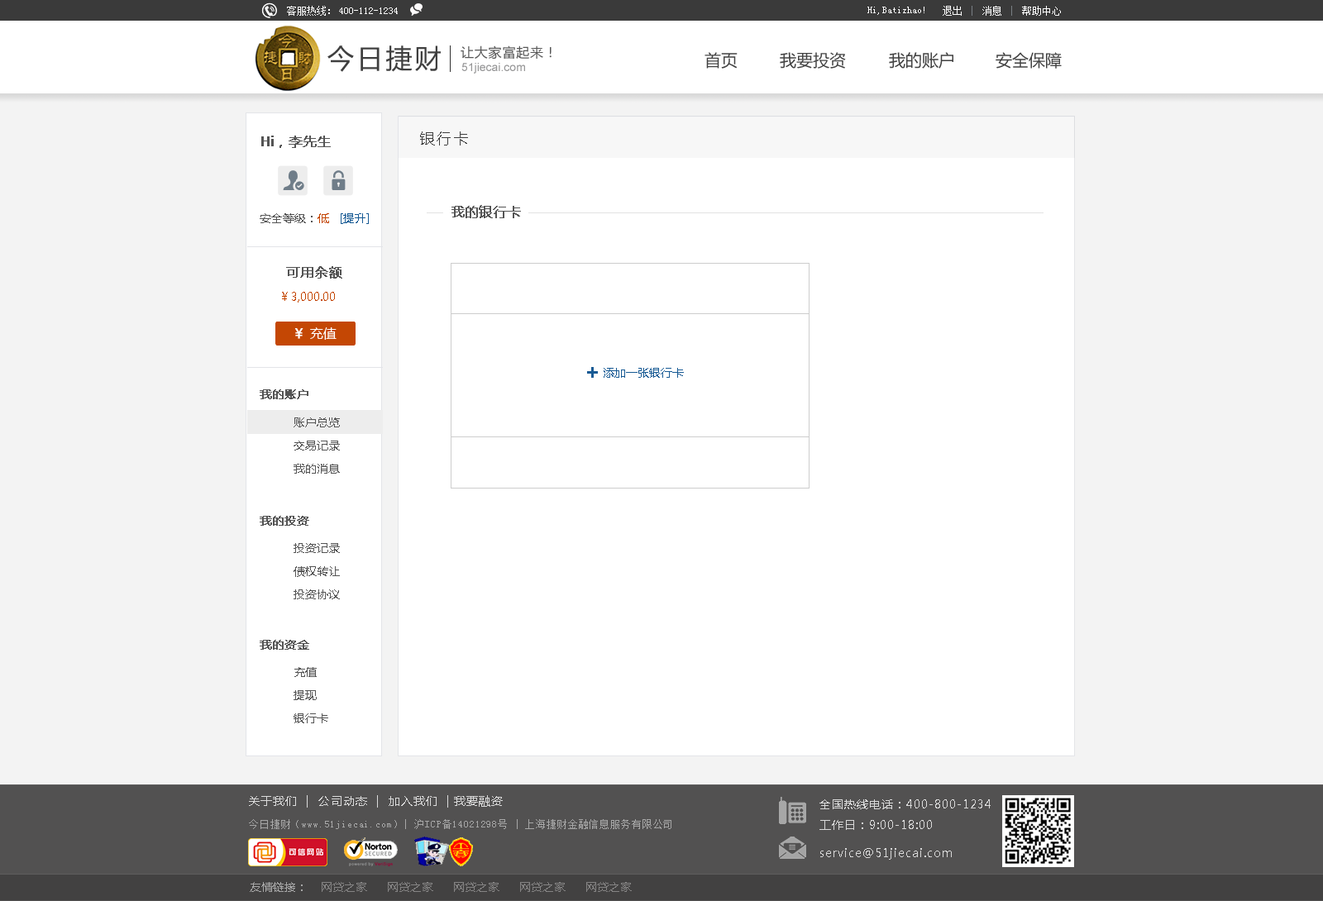
<style>
.page{position:relative;width:1323px;height:901px;background:#ffffff}
.page>*{position:absolute;margin:0}
.t1{font:9.9px "SimSun";color:#ffffff}
.t2{font:26.5px "MicrosoftYaHei";letter-spacing:0.1em;color:#3f3f3f}
.t3{font:13.2px "MicrosoftYaHei";letter-spacing:0.05em;color:#575757}
.t4{font:16.5px "MicrosoftYaHei";color:#414141}
.t5{font:11.6px "ArialMT";color:#969697}
.t6{font:13.2px "MicrosoftYaHei";color:#545454;font-weight:bold}
.t7{font:14.9px "MicrosoftYaHei";letter-spacing:0.1em;color:#3f3f3f}
.t8{font:11.6px "MicrosoftYaHei";color:#545454}
.t9{font:11.6px "MicrosoftYaHei";color:#c44704}
.t10{font:11.6px "MicrosoftYaHei";color:#175a94}
.t11{font:11.6px "MicrosoftYaHei";color:#c44703}
.t12{font:13.2px "MicrosoftYaHei";color:#ffffff}
.t13{font:13.2px "MicrosoftYaHei";color:#ffffff;font-weight:bold}
.t14{font:19.8px "MicrosoftYaHei";color:#175a94;font-weight:bold}
.t15{font:11.6px "MicrosoftYaHei";color:#545454;font-weight:bold}
.t16{font:11.6px/23.2px "MicrosoftYaHei";color:#545454}
.t17{font:11.6px "MicrosoftYaHei";letter-spacing:0.07em;color:#dbdbdb}
.t18{font:11.6px "MicrosoftYaHei";letter-spacing:0.07em;color:#dadada}
.t19{font:9.9px "SimSun";letter-spacing:0.07em;color:#a7a7a7}
.t20{font:11.6px "MicrosoftYaHei";color:#858484}
.t21{font:11.6px "MicrosoftYaHei";color:#a7a7a7}
</style>
<div class="page">
<p class="t1" style="left:287px;top:6px;width:43px;height:10px">客服热线：</p>
<p class="t1" style="left:943px;top:6px;width:118px;height:10px">退出    消息    帮助中心</p>
<p class="t1" style="left:339px;top:7px;width:59px;height:7px">400-112-1234</p>
<p class="t1" style="left:867px;top:7px;width:57px;height:8px">Hi,Batizhao!</p>
<p class="t2" style="left:327px;top:45px;width:114px;height:27px">今日捷财</p>
<p class="t3" style="left:461px;top:45px;width:91px;height:14px">让大家富起来！</p>
<p class="t4" style="left:705px;top:52px;width:33px;height:17px">首页</p>
<p class="t4" style="left:780px;top:52px;width:66px;height:17px">我要投资</p>
<p class="t4" style="left:889px;top:52px;width:64px;height:17px">我的账户</p>
<p class="t4" style="left:996px;top:52px;width:66px;height:17px">安全保障</p>
<p class="t5" style="left:461px;top:63px;width:64px;height:11px">51jiecai.com</p>
<p class="t6" style="left:261px;top:136px;width:70px;height:12px">Hi，李先生</p>
<p class="t7" style="left:420px;top:131px;width:48px;height:15px">银行卡</p>
<p class="t6" style="left:451px;top:205px;width:70px;height:13px">我的银行卡</p>
<p class="t8" style="left:260px;top:213px;width:109px;height:11px">安全等级：<span class="t9">低   </span><span class="t10">[提升]</span></p>
<p class="t6" style="left:286px;top:266px;width:56px;height:13px">可用余额</p>
<p class="t11" style="left:282px;top:292px;width:53px;height:11px">￥3,000.00</p>
<p class="t12" style="left:294px;top:327px;width:43px;height:13px"><span class="t13">￥ </span>充值</p>
<p class="t14" style="left:587px;top:367px;width:11px;height:11px">+</p>
<p class="t10" style="left:604px;top:368px;width:80px;height:10px">添加一张银行卡</p>
<p class="t15" style="left:260px;top:389px;width:48px;height:10px">我的账户</p>
<p class="t16" style="left:294px;top:418px;width:46px;height:56px">账户总览<br>交易记录<br>我的消息</p>
<p class="t15" style="left:260px;top:516px;width:49px;height:10px">我的投资</p>
<p class="t16" style="left:294px;top:543px;width:46px;height:56px">投资记录<br>债权转让<br>投资协议</p>
<p class="t15" style="left:260px;top:640px;width:49px;height:10px">我的资金</p>
<p class="t16" style="left:294px;top:667px;width:34px;height:57px">充值<br>提现<br>银行卡</p>
<p class="t17" style="left:249px;top:795px;width:254px;height:13px">关于我们  |  公司动态  |  加入我们  | 我要融资</p>
<p class="t18" style="left:819px;top:800px;width:172px;height:30px">全国热线电话：400-800-1234<br>工作日：9:00-18:00</p>
<p class="t19" style="left:249px;top:819px;width:422px;height:10px">今日捷财（www.51jiecai.com）| 沪ICP备14021298号 | 上海捷财金融信息服务有限公司</p>
<p class="t18" style="left:820px;top:848px;width:132px;height:12px">service@51jiecai.com</p>
<p class="t20" style="left:250px;top:882px;width:382px;height:10px"><span class="t21">友情链接：</span>    网贷之家      网贷之家      网贷之家      网贷之家      网贷之家</p>
</div>
